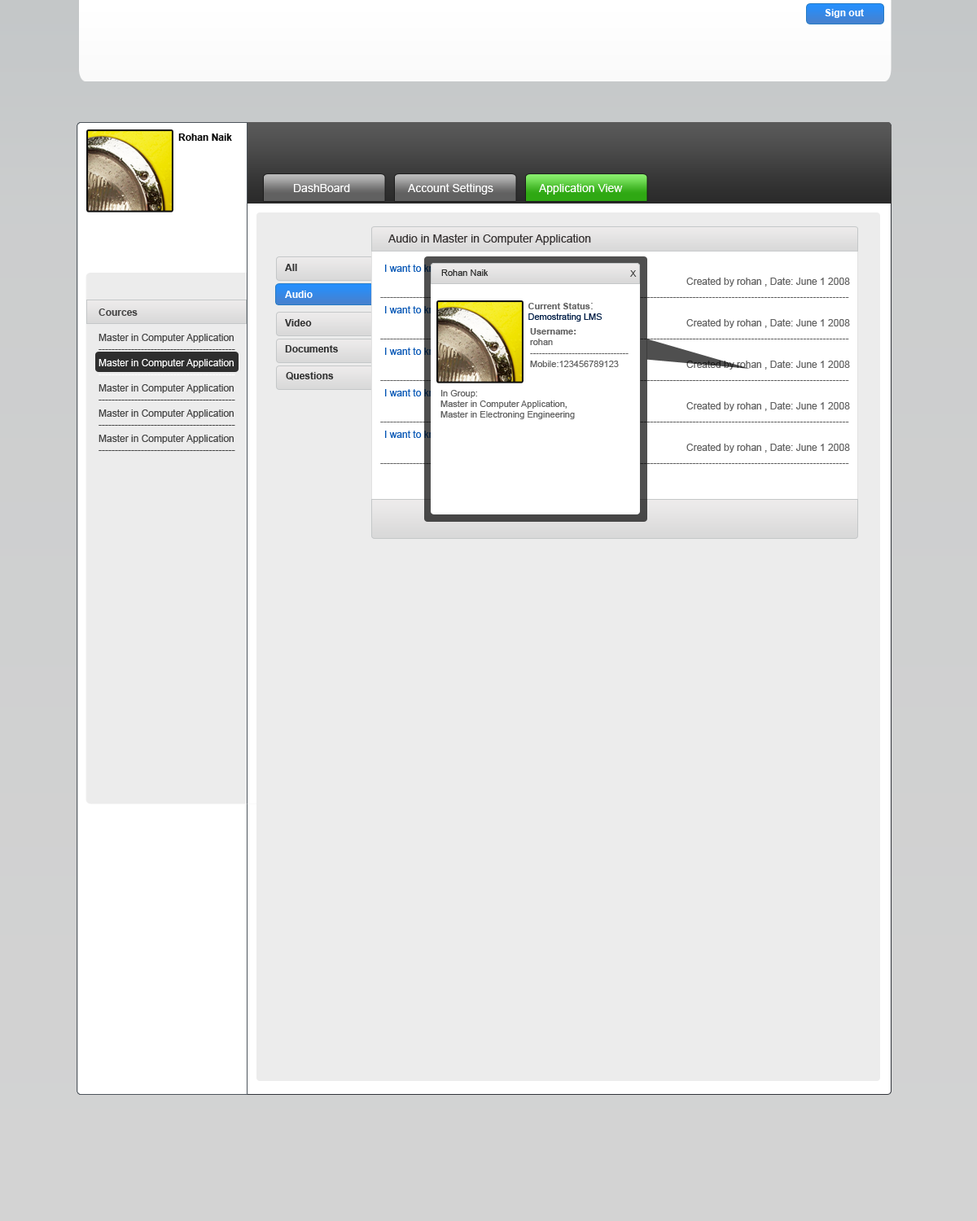
<style>
.page{position:relative;width:977px;height:1221px;background:#ececec}
.page>*{position:absolute;margin:0}
.t1{font:9.8px "Arial-BoldMT";color:#ffffff}
.t2{font:9.8px "Arial-BoldMT";color:#060606}
.t3{font:11.4px "ArialMT";color:#ffffff}
.t4{font:11.4px "ArialMT";color:#373333}
.t5{font:9.8px "Arial-BoldMT";color:#323232}
.t6{font:9px "ArialMT";color:#2f2f2e}
.t7{font:9.8px "ArialMT";color:#616161}
.t8{font:9px "ArialMT";color:#011e47}
.t9{font:9px "Arial-BoldMT";color:#666666}
.t10{font:11.4px "ArialMT";color:#666666}
.t11{font:9.8px "Arial-BoldMT";color:#464646}
.t12{font:9px "ArialMT";color:#616161}
.t13{font:9px "Arial-BoldMT";color:#616161}
.t14{font:9.8px "ArialMT";color:#464646}
.t15{font:9.8px "ArialMT";color:#ffffff}
</style>
<div class="page">
<p class="t1" style="left:824px;top:9px;width:40px;height:9px">Sign out</p>
<p class="t2" style="left:178px;top:133px;width:54px;height:8px">Rohan Naik</p>
<p class="t3" style="left:294px;top:184px;width:56px;height:8px">DashBoard</p>
<p class="t3" style="left:408px;top:183px;width:85px;height:12px">Account Settings</p>
<p class="t3" style="left:539px;top:183px;width:84px;height:12px">Application View</p>
<p class="t4" style="left:388px;top:234px;width:203px;height:11px">Audio in Master in Computer Application</p>
<p class="t5" style="left:285px;top:264px;width:12px;height:7px">All</p>
<p class="t6" style="left:441px;top:269px;width:47px;height:7px">Rohan Naik</p>
<p class="t6" style="left:630px;top:270px;width:6px;height:7px">X</p>
<p class="t7" style="left:686px;top:278px;width:164px;height:8px">Created by rohan , Date: June 1 2008</p>
<p class="t1" style="left:285px;top:291px;width:28px;height:7px">Audio</p>
<p class="t8" style="left:528px;top:303px;width:74px;height:18px"><span class="t9">Current Status</span><span class="t10">:<br></span>Demostrating LMS</p>
<p class="t11" style="left:98px;top:308px;width:40px;height:8px">Cources</p>
<p class="t5" style="left:285px;top:319px;width:27px;height:7px">Video</p>
<p class="t12" style="left:530px;top:328px;width:98px;height:39px"><span class="t13">Username:<br></span>rohan<br>---------------------------------<br>Mobile:123456789123</p>
<p class="t7" style="left:686px;top:319px;width:164px;height:9px">Created by rohan , Date: June 1 2008</p>
<p class="t14" style="left:98px;top:334px;width:137px;height:16px">Master in Computer Application<br>------------------------------------------</p>
<p class="t5" style="left:285px;top:345px;width:53px;height:7px">Documents</p>
<p class="t15" style="left:98px;top:359px;width:137px;height:16px">Master in Computer Application<br>------------------------------------------</p>
<p class="t7" style="left:686px;top:361px;width:164px;height:9px">Created by rohan , Date: June 1 2008</p>
<p class="t5" style="left:286px;top:372px;width:48px;height:8px">Questions</p>
<p class="t14" style="left:98px;top:384px;width:137px;height:16px">Master in Computer Application<br>------------------------------------------</p>
<p class="t12" style="left:440px;top:390px;width:135px;height:29px">In Group:<br>Master in Computer Application,<br>Master in Electroning Engineering</p>
<p class="t14" style="left:98px;top:409px;width:137px;height:17px">Master in Computer Application<br>------------------------------------------</p>
<p class="t7" style="left:686px;top:402px;width:164px;height:9px">Created by rohan , Date: June 1 2008</p>
<p class="t14" style="left:98px;top:435px;width:137px;height:16px">Master in Computer Application<br>------------------------------------------</p>
<p class="t7" style="left:686px;top:444px;width:164px;height:9px">Created by rohan , Date: June 1 2008</p>
</div>
